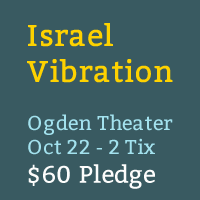
<style>
.page{position:relative;width:200px;height:200px;background:#395a61}
.page>*{position:absolute;margin:0}
.t1{font:20px "Bitter-Regular";letter-spacing:0.018em;color:#a3e2ee}
.t2{font:30px "Bitter-Regular";letter-spacing:0.018em;color:#fed200;font-weight:bold}
.t3{font:24px "Bitter-Regular";letter-spacing:0.018em;color:#fdfdfc}
</style>
<div class="page">
<p class="t1" style="left:27px;top:23px;width:146px;height:166px"><span class="t2">Israel<br>Vibration<br></span><br>Ogden Theater<br>Oct 22 - 2 Tix<br><span class="t3">$60 Pledge</span></p>
</div>
